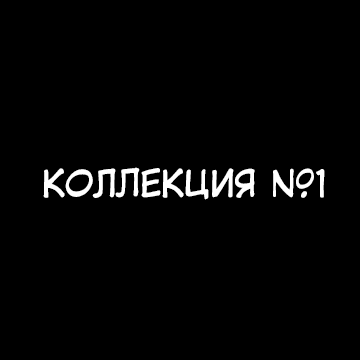
<style>
.page{position:relative;width:360px;height:360px;background:#000000}
.page>*{position:absolute;margin:0}
.t1{font:36px "KuraiVoice2";color:#ffffff;text-transform:uppercase}
</style>
<div class="page">
<p class="t1" style="left:43px;top:167px;width:282px;height:33px">коллекция №1</p>
</div>
